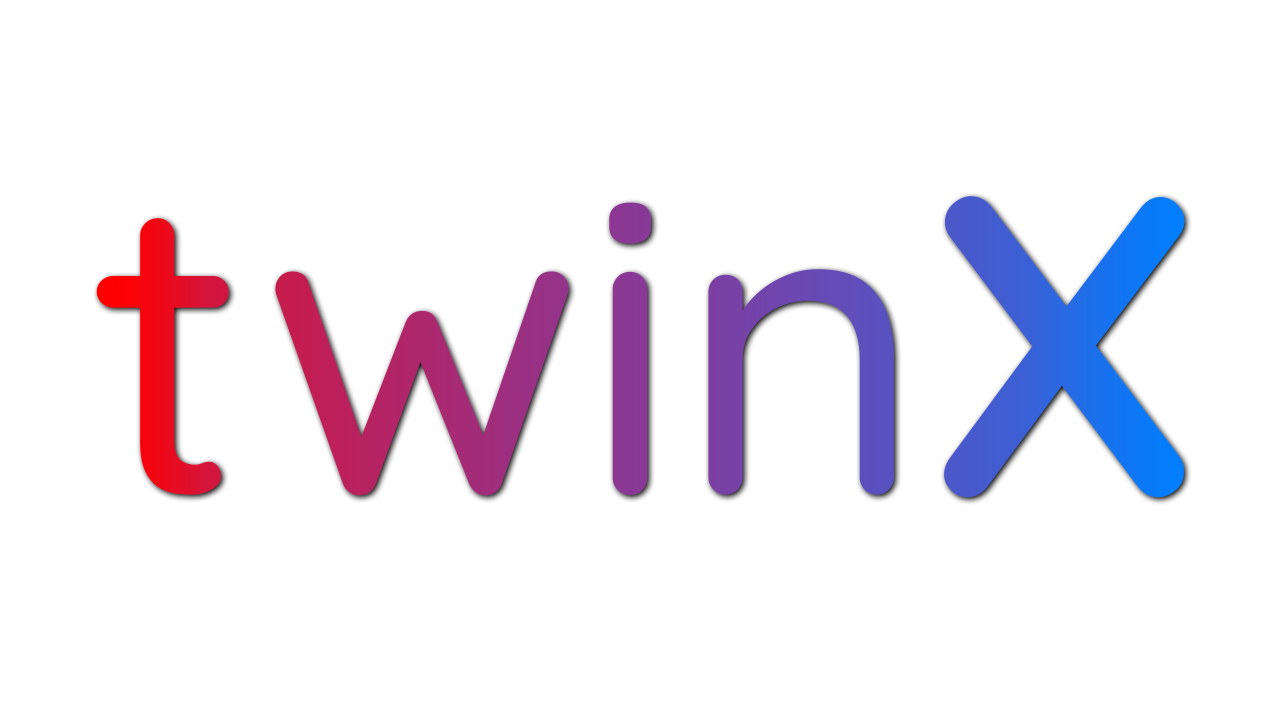
<style>
.page{position:relative;width:1280px;height:720px;background:#ffffff}
.page>*{position:absolute;margin:0}
.t1{font:425px "Quicksand-Medium"}
.t2{font:425px "Quicksand-Bold"}
</style>
<div class="page">
<p class="t1" style="left:96px;top:196px;width:1089px;height:302px">twin<span class="t2">X</span></p>
</div>
